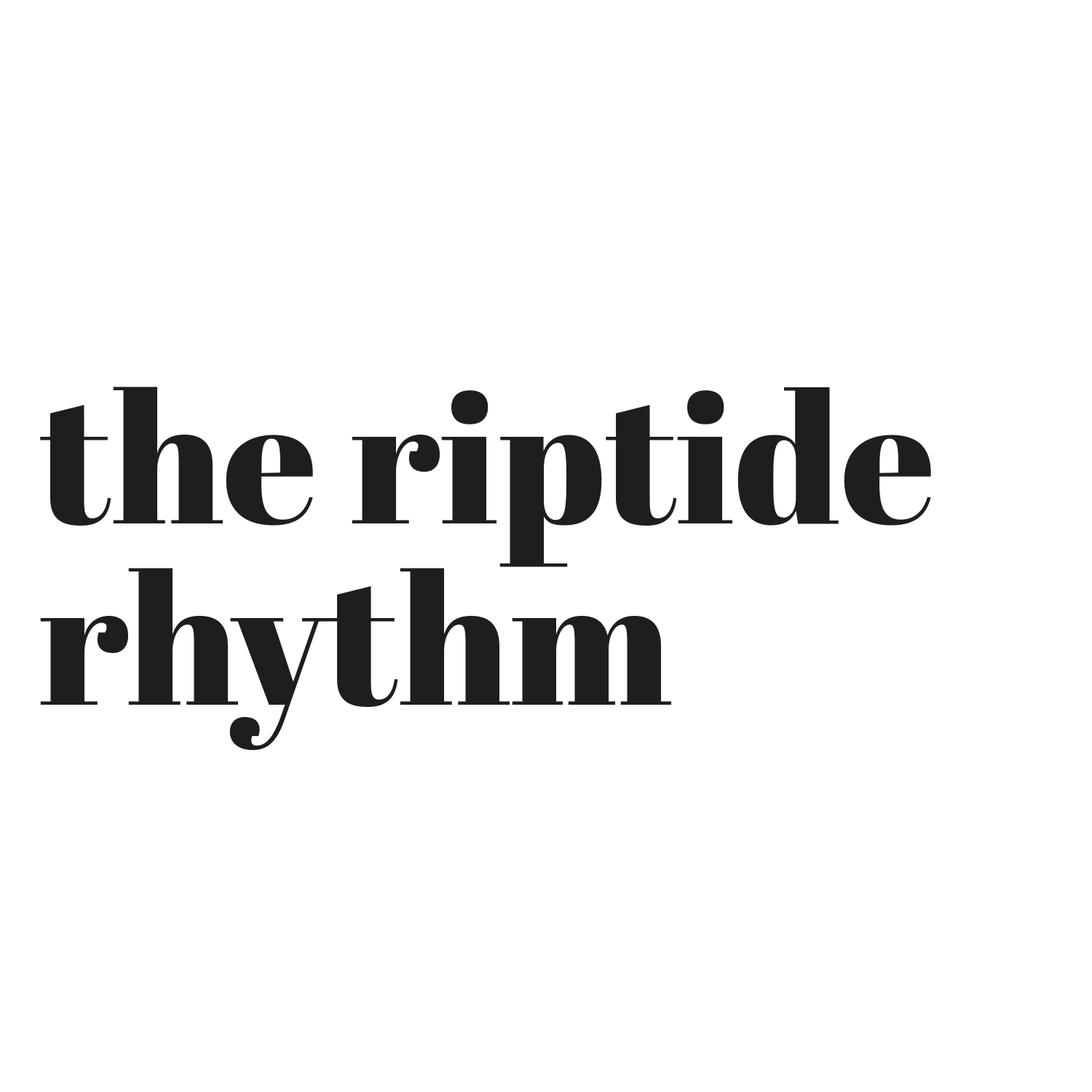
<style>
.page{position:relative;width:1092px;height:1092px;background:#ffffff}
.page>*{position:absolute;margin:0}
.t1{font:182px "AbrilFatface-Regular";color:#1e1e1e}
</style>
<div class="page">
<p class="t1" style="left:40px;top:387px;width:891px;height:180px">the riptide</p>
<p class="t1" style="left:40px;top:568px;width:631px;height:183px">rhythm</p>
</div>
